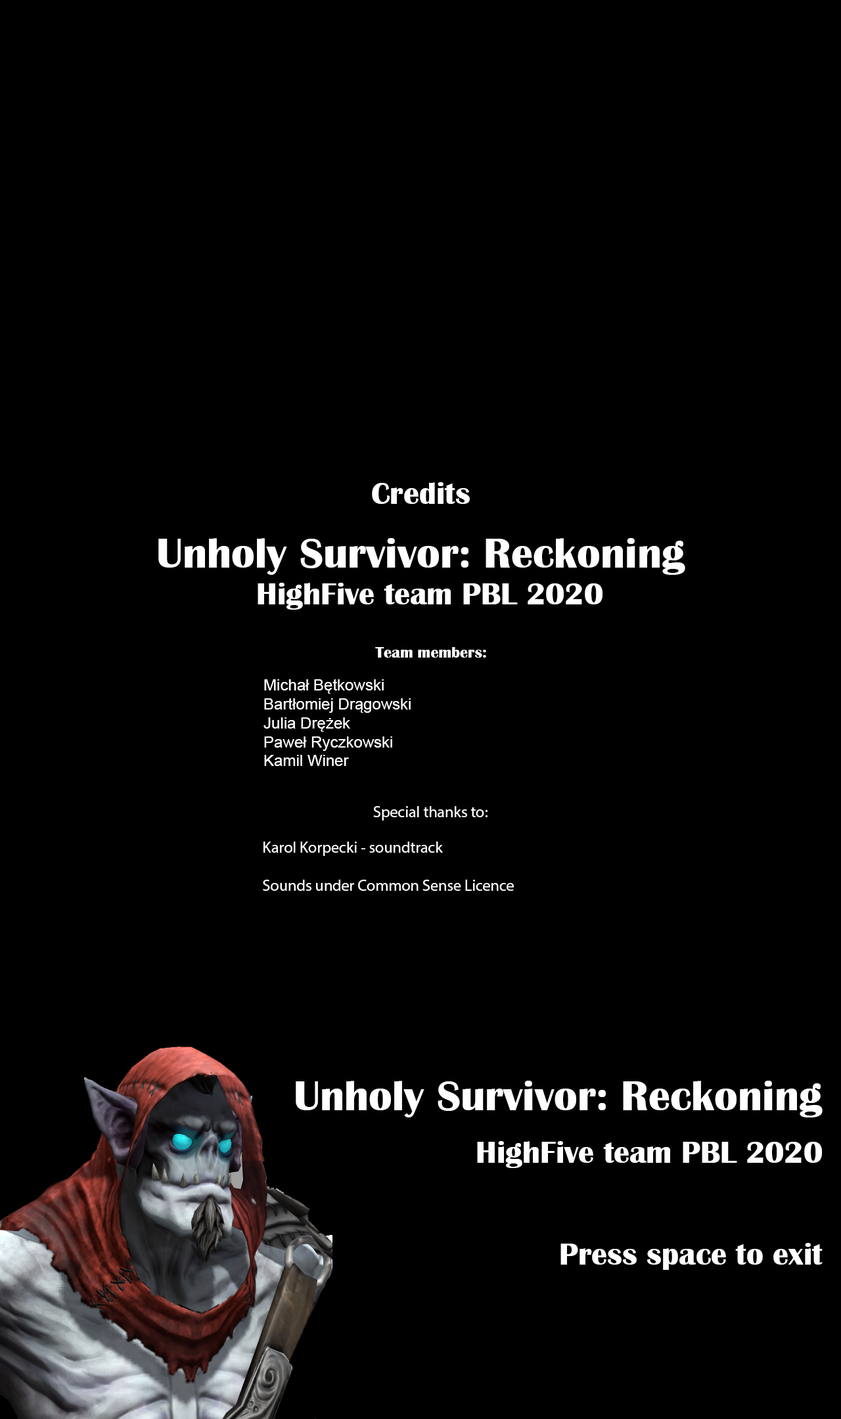
<style>
.page{position:relative;width:841px;height:1419px;background:#000000}
.page>*{position:absolute;margin:0}
.t1{font:31.5px "BritannicBold";color:#ffffff}
.t2{font:43.3px "BritannicBold";color:#ffffff}
.t3{font:15.8px "BritannicBold";color:#ffffff}
.t4{font:15.8px "ArialMT";color:#ffffff}
.t5{font:15.8px "MyriadPro-Regular";color:#ffffff}
</style>
<div class="page">
<p class="t1" style="left:372px;top:482px;width:98px;height:22px">Credits</p>
<p class="t2" style="left:158px;top:538px;width:527px;height:37px">Unholy Survivor: Reckoning</p>
<p class="t1" style="left:257px;top:583px;width:345px;height:26px">HighFive team PBL 2020</p>
<p class="t3" style="left:375px;top:646px;width:111px;height:11px">Team members:</p>
<p class="t4" style="left:263px;top:678px;width:147px;height:88px">Michał Bętkowski<br>Bartłomiej Drągowski<br>Julia Drężek<br>Paweł Ryczkowski<br>Kamil Winer</p>
<p class="t5" style="left:373px;top:806px;width:114px;height:14px">Special thanks to:</p>
<p class="t5" style="left:263px;top:841px;width:251px;height:50px">Karol Korpecki - soundtrack<br><br>Sounds under Common Sense Licence</p>
<p class="t2" style="left:296px;top:1080px;width:526px;height:37px">Unholy Survivor: Reckoning</p>
<p class="t1" style="left:477px;top:1141px;width:345px;height:27px">HighFive team PBL 2020</p>
<p class="t1" style="left:560px;top:1243px;width:262px;height:26px">Press space to exit</p>
</div>
